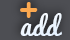
<style>
.page{position:relative;width:70px;height:40px;background:#4d4e53}
.page>*{position:absolute;margin:0}
.t1{font:39.3px "Pacifico";color:#faa850}
.t2{font:26px "Pacifico";color:#f7fbff}
</style>
<div class="page">
<p class="t1" style="left:20px;top:2px;width:18px;height:16px">+</p>
<p class="t2" style="left:20px;top:13px;width:42px;height:23px">add</p>
</div>
